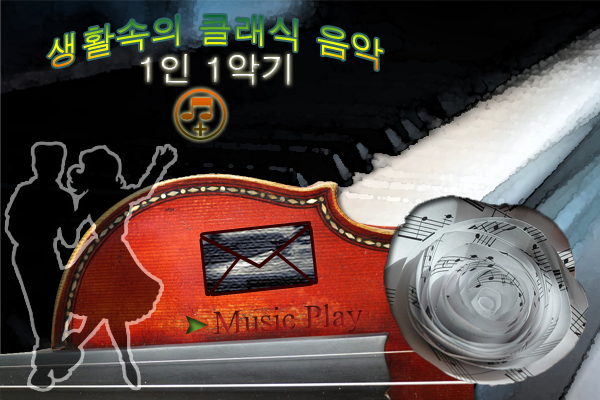
<style>
.page{position:relative;width:600px;height:400px}
.page>*{position:absolute;margin:0}
.t1{font:35px "Dotum"}
.t2{font:35px "Dotum";color:#ffffff}
.t3{font:33px "TimesNewRomanPSMT"}
</style>
<div class="page">
<p class="t1" style="left:47px;top:15px;width:336px;height:55px">생활속의 클래식 음악</p>
<p class="t2" style="left:141px;top:54px;width:149px;height:31px">1인 1악기</p>
<p class="t3" style="left:213px;top:303px;width:150px;height:31px;rotate:-3deg">Music Play</p>
</div>
